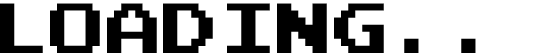
<style>
.page{position:relative;width:533px;height:55px;background:#ffffff}
.page>*{position:absolute;margin:0}
.t1{font:56.5px "PressStart2P";color:#000000}
</style>
<div class="page">
<p class="t1" style="left:0px;top:3px;width:476px;height:50px">LOADING..</p>
</div>
